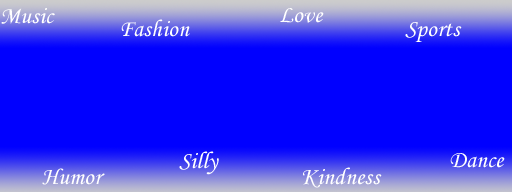
<style>
.page{position:relative;width:512px;height:192px;background:#0000ff}
.page>*{position:absolute;margin:0}
.t1{font:23.9px "MonotypeCorsiva";color:#ffffff}
</style>
<div class="page">
<p class="t1" style="left:1px;top:8px;width:54px;height:16px">Music</p>
<p class="t1" style="left:280px;top:8px;width:44px;height:15px">Love</p>
<p class="t1" style="left:121px;top:19px;width:69px;height:18px">Fashion</p>
<p class="t1" style="left:405px;top:22px;width:57px;height:20px">Sports</p>
<p class="t1" style="left:179px;top:151px;width:40px;height:24px">Silly</p>
<p class="t1" style="left:450px;top:153px;width:55px;height:15px">Dance</p>
<p class="t1" style="left:42px;top:168px;width:63px;height:17px">Humor</p>
<p class="t1" style="left:303px;top:167px;width:79px;height:21px">Kindness</p>
</div>
